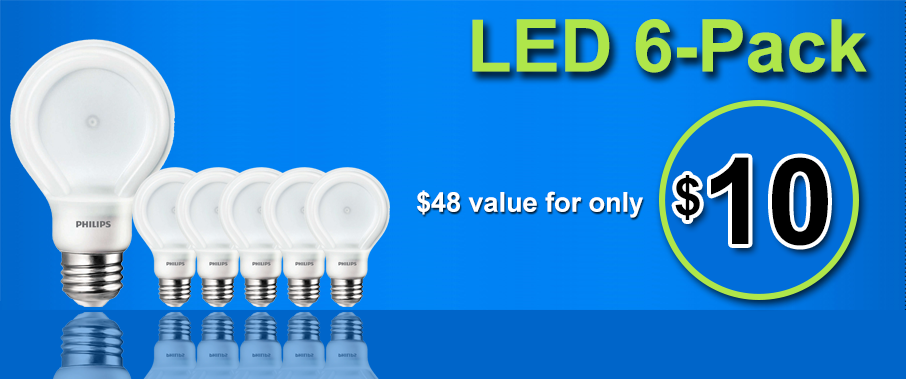
<style>
.page{position:relative;width:906px;height:379px}
.page>*{position:absolute;margin:0}
.t1{font:72.9px "Arial-BoldMT";letter-spacing:-0.005em;color:#afe64a}
.t2{font:119.8px "Arial-BoldMT";letter-spacing:-0.005em;color:#000000}
.t3{font:87.8px "Arial-BoldMT";letter-spacing:-0.005em;color:#000000}
.t4{font:27.5px "Arial-BoldMT";letter-spacing:-0.005em;color:#ffffff}
</style>
<div class="page">
<p class="t1" style="left:472px;top:19px;width:395px;height:54px">LED 6-Pack</p>
<p class="t2" style="left:675px;top:157px;width:153px;height:89px"><span class="t3">$</span>10</p>
<p class="t4" style="left:417px;top:190px;width:226px;height:28px">$48 value for only</p>
</div>
